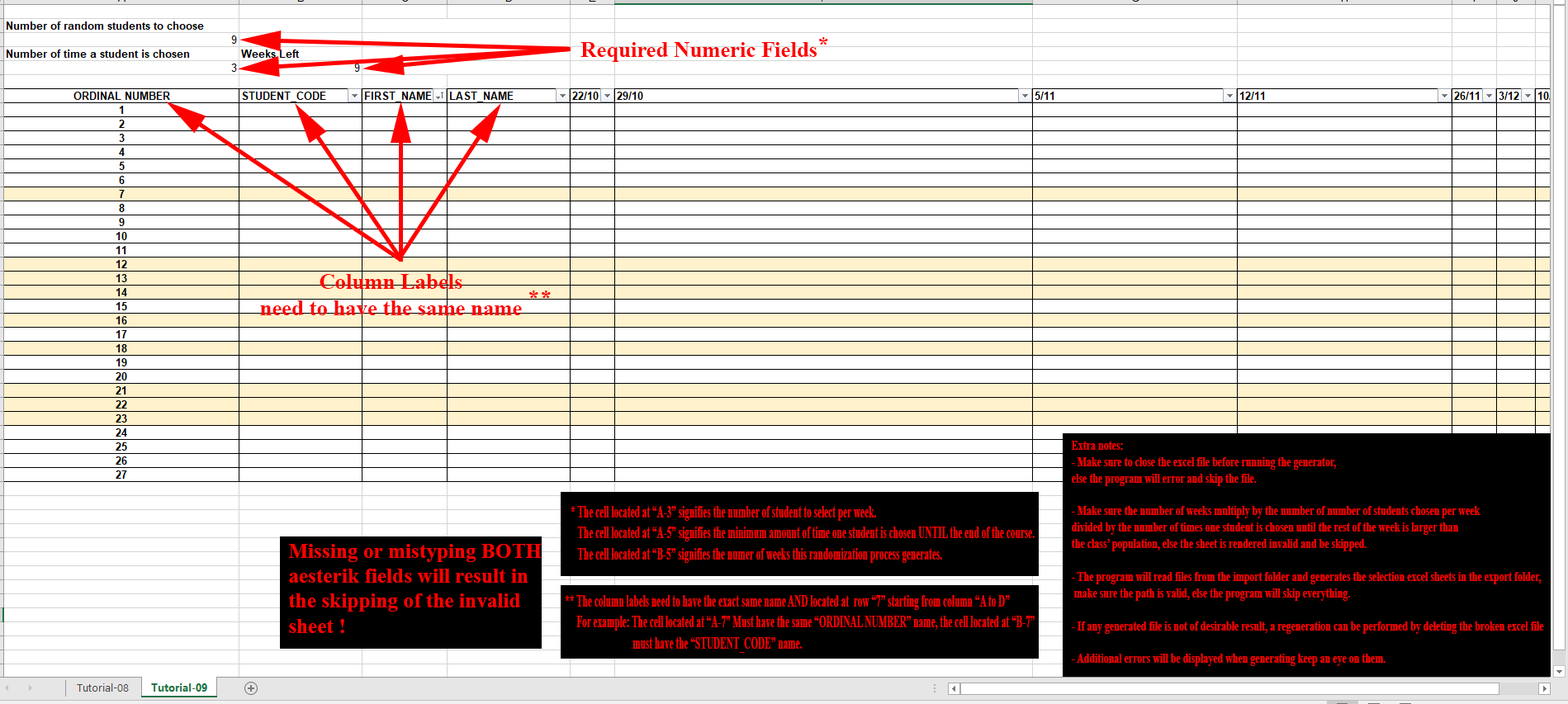
<style>
.page{position:relative;width:1568px;height:704px;background:#ffffff}
.page>*{position:absolute;margin:0}
.t1{font:22px "TimesNewRomanPS-BoldMT";color:#fe0000}
.t2{font:13.7px "TimesNewRomanPS-BoldMT";color:#fe0000;scale:0.72 1}
.t3{font:17.6px "TimesNewRomanPS-BoldMT";color:#fe0000;scale:0.53 1}
.t4{font:20.9px "TimesNewRomanPS-BoldMT";color:#fe0000}
</style>
<div class="page">
<p class="t1" style="left:819px;top:37px;width:9px;height:8px">*</p>
<p class="t1" style="left:580px;top:42px;width:237px;height:20px">Required Numeric Fields</p>
<p class="t1" style="left:260px;top:274px;width:262px;height:41px;text-align:center">Column Labels<br>need to have the same name</p>
<p class="t2" style="left:1071px;top:441px;width:473px;height:225px">Extra notes: <br>- Make sure to close the excel file before running the generator, <br>else the program will error and skip the file.<br><br>- Make sure the number of weeks multiply by the number of number of students chosen per week <br>divided by the number of times one student is chosen until the rest of the week is larger than<br>the class’ population, else the sheet is rendered invalid and be skipped.<br><br>- The program will read files from the import folder and generates the selection excel sheets in the export folder,<br> make sure the path is valid, else the program will skip everything.<br><br>- If any generated file is not of desirable result, a regeneration can be performed by deleting the broken excel file<br><br>- Additional errors will be displayed when generating keep an eye on them.</p>
<p class="t3" style="left:571px;top:506px;width:464px;height:57px">* The cell located at “A-3” signifies the number of student to select per week.<br>   The cell located at “A-5” signifies the minimum amount of time one student is chosen UNTIL the end of the course.<br>   The cell located at “B-5” signifies the numer of weeks this randomization process generates.</p>
<p class="t4" style="left:288px;top:544px;width:254px;height:89px">Missing or mistyping BOTH<br>aesterik fields will result in<br>the skipping of the invalid<br>sheet !</p>
<p class="t3" style="left:565px;top:595px;width:470px;height:58px">** The column labels need to have the exact same name AND located at  row “7” starting from column “A to D”<br>     For example: The cell located at “A-7” Must have the same “ORDINAL NUMBER” name, the cell located at “B-7”<br>                             must have the “STUDENT_CODE” name.</p>
</div>
